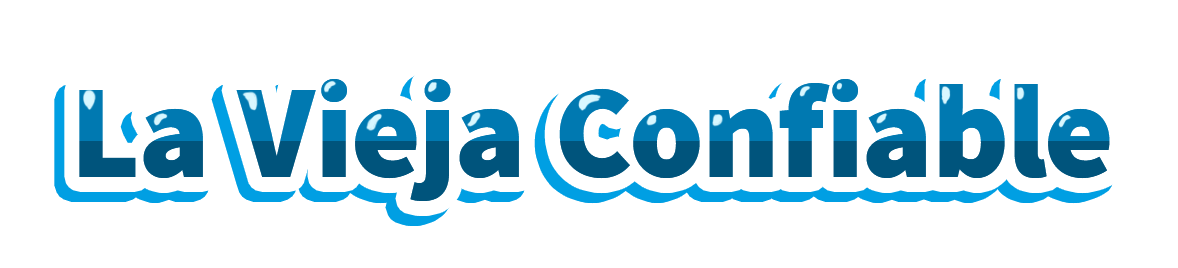
<style>
.page{position:relative;width:1178px;height:268px;background:#ffffff}
.page>*{position:absolute;margin:0}
.t1{font:133.3px "SourceSansPro-Black"}
</style>
<div class="page">
<p class="t1" style="left:79px;top:79px;width:1031px;height:122px">La Vieja Confiable</p>
</div>
